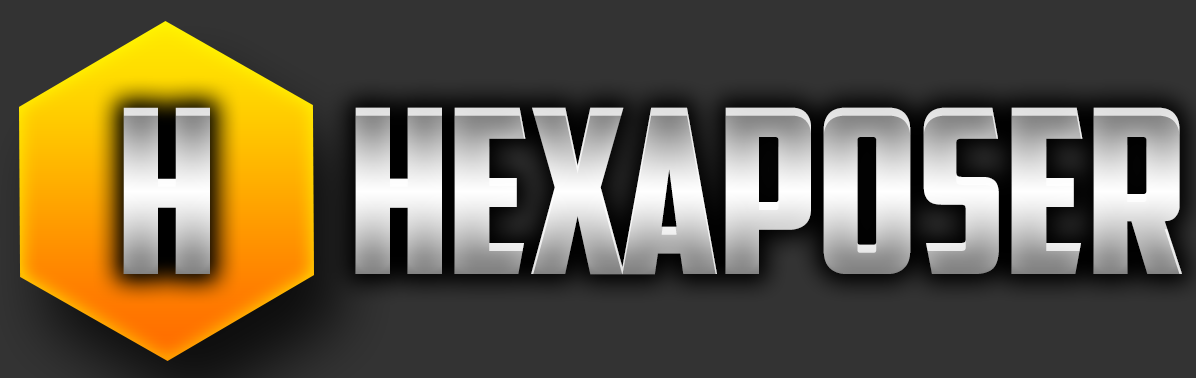
<style>
.page{position:relative;width:1196px;height:378px;background:#333333}
.page>*{position:absolute;margin:0}
.t1{font:229.2px "AmericanCaptain"}
</style>
<div class="page">
<p class="t1" style="left:355px;top:107px;width:827px;height:168px">Hexaposer</p>
</div>
